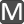
<style>
.page{position:relative;width:24px;height:24px;background:#4d4d4d}
.page>*{position:absolute;margin:0}
.t1{font:26.7px "Calibri";color:#ffffff;scale:1.05 1}
</style>
<div class="page">
<p class="t1" style="left:2px;top:3px;width:20px;height:17px">M</p>
</div>
